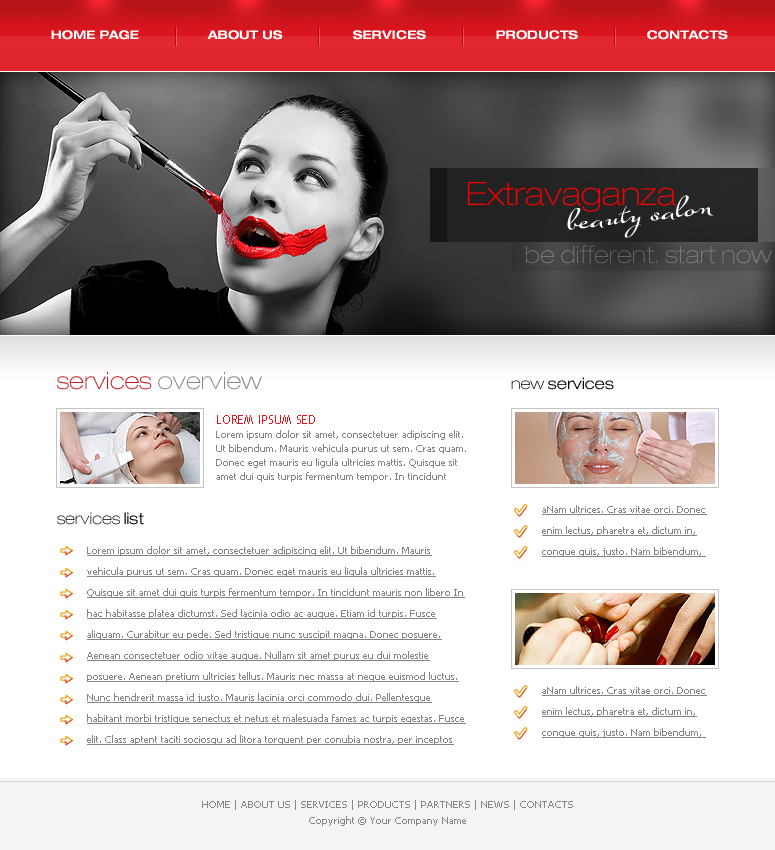
<style>
.page{position:relative;width:775px;height:850px;background:#ffffff}
.page>*{position:absolute;margin:0}
.t1{font:12px "HelveticaNeueLTPro-BdEx";color:#ffffff}
.t2{font:32.2px "HelveticaNeueLTPro-ThEx";color:#f80000}
.t3{font:32.2px "SuaveScriptAlt-Bold";color:#ffffff}
.t4{font:24px "HelveticaNeueLTPro-ThEx";color:#717171}
.t5{font:24px "HelveticaNeueLTPro-ThEx";color:#cf151c}
.t6{font:24px "HelveticaNeueLTPro-ThEx";color:#858585}
.t7{font:16px "HelveticaNeueLTPro-LtEx";color:#000000}
.t8{font:16px "HelveticaNeueLTPro-ThEx";color:#000000}
.t9{font:10px/14px "Tahoma";color:#858585}
.t10{font:12px/12px "TrebuchetMS";color:#e3151d;text-transform:uppercase}
.t11{font:10px/21px "Tahoma";color:#858585;text-decoration:underline}
.t12{font:10px/16px "Tahoma";color:#858585}
</style>
<div class="page">
<p class="t1" style="left:51px;top:30px;width:88px;height:10px">HOME PAGE</p>
<p class="t1" style="left:207px;top:30px;width:76px;height:10px">ABOUT US</p>
<p class="t1" style="left:353px;top:30px;width:73px;height:10px">SERVICES</p>
<p class="t1" style="left:496px;top:30px;width:82px;height:10px">PRODUCTS</p>
<p class="t1" style="left:647px;top:30px;width:81px;height:10px">CONTACTS</p>
<p class="t2" style="left:468px;top:182px;width:209px;height:30px">Extravaganza</p>
<p class="t3" style="left:567px;top:195px;width:147px;height:43px;rotate:-7deg">beauty salon</p>
<p class="t4" style="left:526px;top:245px;width:246px;height:19px">be different. start now</p>
<p class="t5" style="left:57px;top:371px;width:205px;height:19px">services <span class="t6">overview</span></p>
<p class="t7" style="left:511px;top:377px;width:103px;height:13px"><span class="t8">new </span>services</p>
<p class="t9" style="left:216px;top:415px;width:250px;height:67px"><span class="t10">LOREM IPSUM sed <br></span>Lorem ipsum dolor sit amet, consectetuer adipiscing elit. Ut bibendum. Mauris vehicula purus ut sem. Cras quam. Donec eget mauris eu ligula ultricies mattis. Quisque sit amet dui quis turpis fermentum tempor. In tincidunt</p>
<p class="t11" style="left:542px;top:505px;width:165px;height:52px">aNam ultrices. Cras vitae orci. Donec enim lectus, pharetra et, dictum in, congue quis, justo. Nam bibendum,</p>
<p class="t8" style="left:57px;top:512px;width:87px;height:13px">services <span class="t7">list</span></p>
<p class="t11" style="left:87px;top:546px;width:379px;height:199px">Lorem ipsum dolor sit amet, consectetuer adipiscing elit. Ut bibendum. Mauris vehicula purus ut sem. Cras quam. Donec eget mauris eu ligula ultricies mattis. Quisque sit amet dui quis turpis fermentum tempor. In tincidunt mauris non libero In hac habitasse platea dictumst. Sed lacinia odio ac augue. Etiam id turpis. Fusce aliquam. Curabitur eu pede. Sed tristique nunc suscipit magna. Donec posuere. Aenean consectetuer odio vitae augue. Nullam sit amet purus eu dui molestie posuere. Aenean pretium ultricies tellus. Mauris nec massa at neque euismod luctus. Nunc hendrerit massa id justo. Mauris lacinia orci commodo dui. Pellentesque habitant morbi tristique senectus et netus et malesuada fames ac turpis egestas. Fusce elit. Class aptent taciti sociosqu ad litora torquent per conubia nostra, per inceptos</p>
<p class="t11" style="left:542px;top:686px;width:165px;height:52px">aNam ultrices. Cras vitae orci. Donec enim lectus, pharetra et, dictum in, congue quis, justo. Nam bibendum,</p>
<p class="t12" style="left:202px;top:800px;width:371px;height:26px;text-align:center">HOME | ABOUT US | SERVICES | PRODUCTS | PARTNERS | NEWS | CONTACTS<br>Copyright © Your Company Name</p>
</div>
